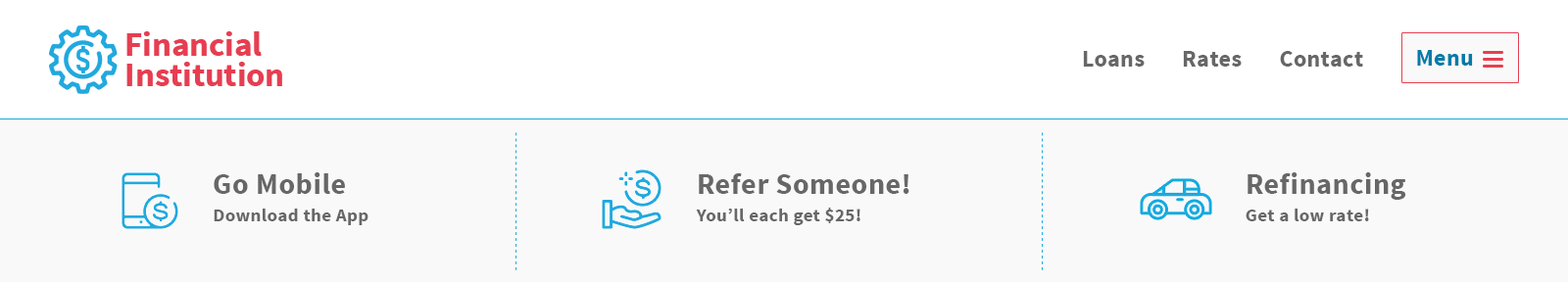
<style>
.page{position:relative;width:1568px;height:282px;background:#f9f9f9}
.page>*{position:absolute;margin:0}
.t1{font:23.5px "SourceSansPro-Bold";letter-spacing:0.017em;color:#676767}
.t2{font:23.5px "SourceSansPro-Bold";letter-spacing:0.017em;color:#007ca9}
.t3{font:18.6px/27.4px "SourceSansPro-Bold";letter-spacing:0.017em;color:#676767}
.t4{font:29.4px/27.4px "SourceSansPro-Bold";letter-spacing:0.017em;color:#676767}
</style>
<div class="page">
<p class="t1" style="left:1083px;top:51px;width:280px;height:16px">Loans       Rates       Contact</p>
<p class="t2" style="left:1417px;top:50px;width:56px;height:16px">Menu</p>
<p class="t3" style="left:214px;top:172px;width:154px;height:53px"><span class="t4">Go Mobile<br></span>Download the App</p>
<p class="t3" style="left:696px;top:173px;width:213px;height:52px"><span class="t4">Refer Someone!<br></span>You’ll each get $25!</p>
<p class="t3" style="left:1246px;top:172px;width:160px;height:49px"><span class="t4">Refinancing<br></span>Get a low rate!</p>
</div>
